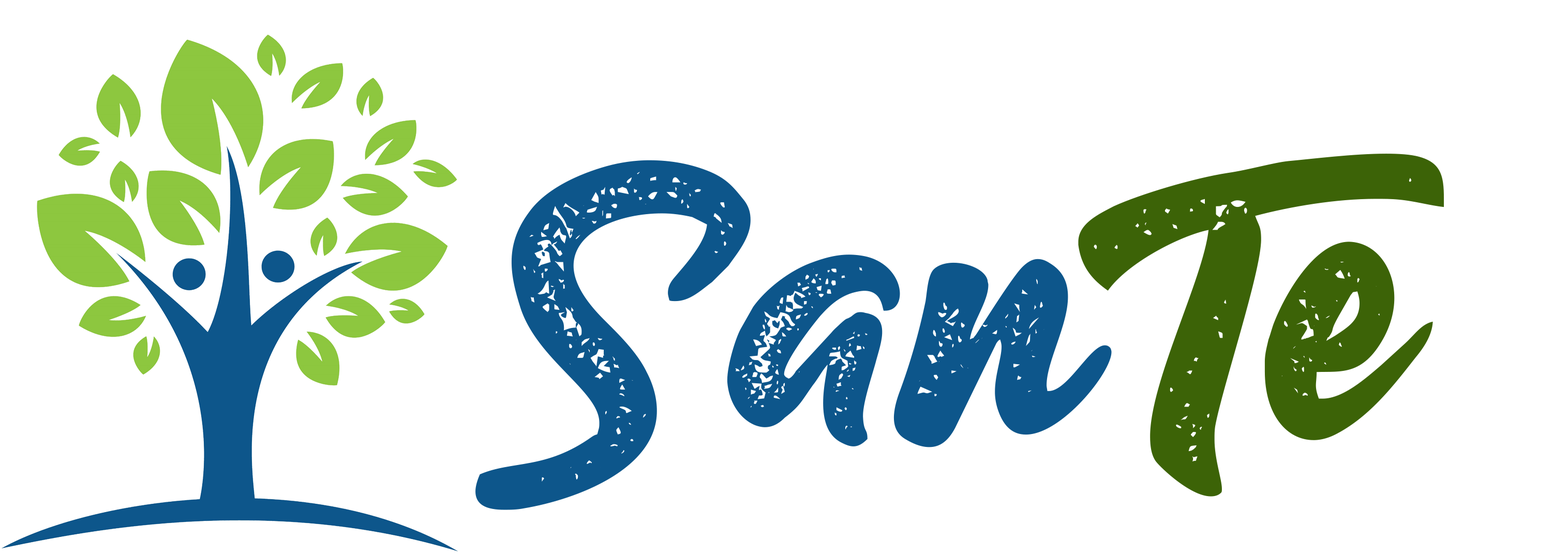
<style>
.page{position:relative;width:1568px;height:554px;background:#ffffff}
.page>*{position:absolute;margin:0}
.t1{font:737.4px "Gilberto";color:#0d568b}
.t2{font:740.1px "Gilberto";color:#3c6307}
</style>
<div class="page">
<p class="t1" style="left:475px;top:160px;width:637px;height:350px">San</p>
<p class="t2" style="left:1078px;top:154px;width:366px;height:343px">Te</p>
</div>
